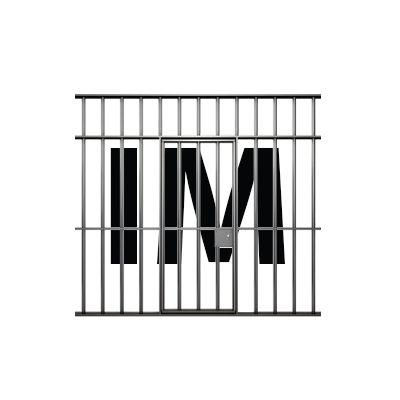
<style>
.page{position:relative;width:400px;height:400px;background:#ffffff}
.page>*{position:absolute;margin:0}
.t1{font:172px "MyriadPro-Bold";color:#050608}
</style>
<div class="page">
<p class="t1" style="left:110px;top:147px;width:175px;height:117px">IM</p>
</div>
